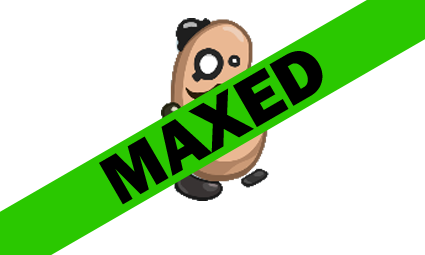
<style>
.page{position:relative;width:425px;height:255px;background:#ffffff}
.page>*{position:absolute;margin:0}
.t1{font:72px "FranklinGothic-Heavy";color:#000000}
</style>
<div class="page">
<p class="t1" style="left:99px;top:51px;width:224px;height:154px;rotate:-30deg">MAXED</p>
</div>
